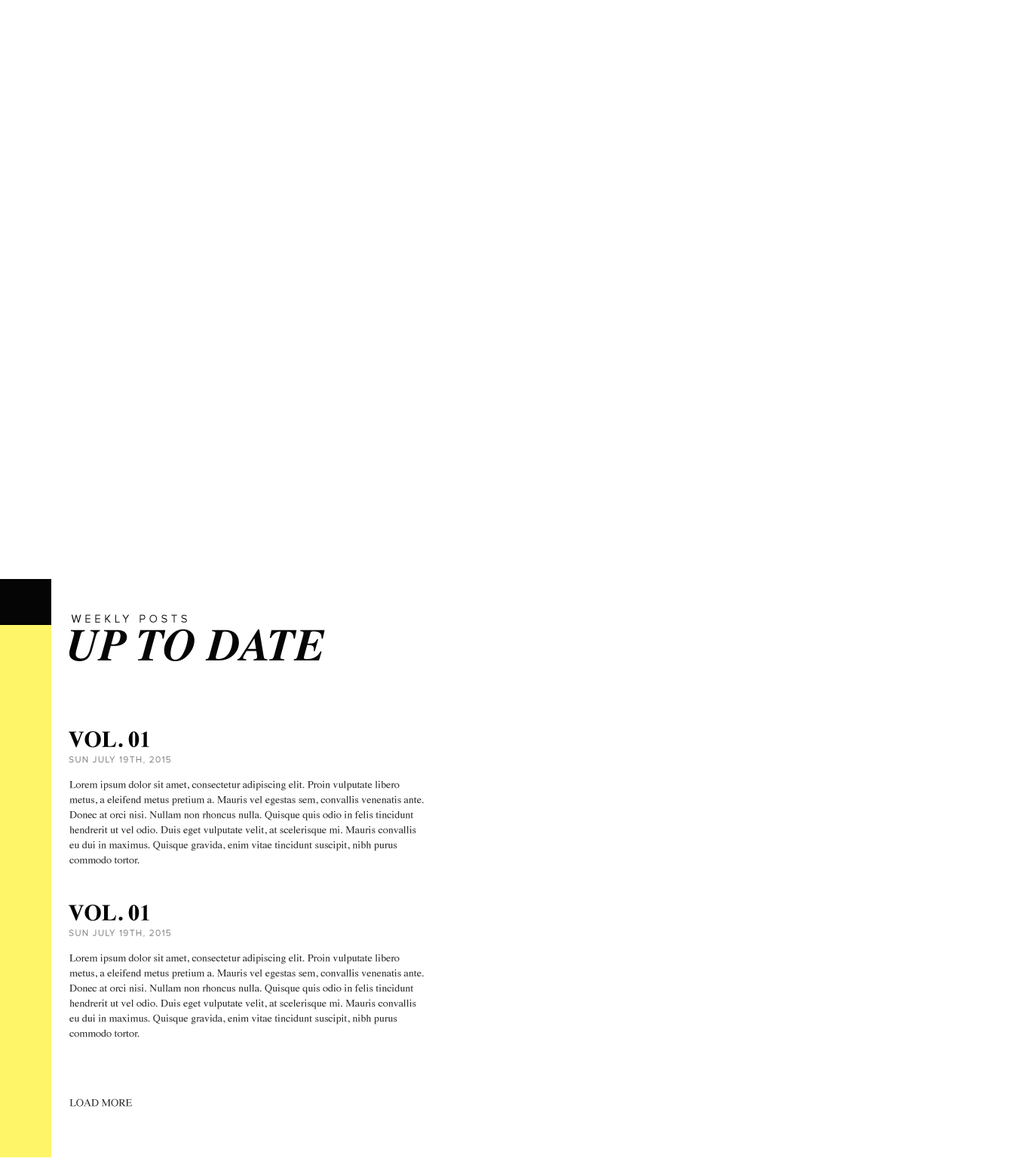
<style>
.page{position:relative;width:1030px;height:1158px;background:#ffffff}
.page>*{position:absolute;margin:0}
.t1{font:11.3px "ProximaNova-Regular";letter-spacing:0.3em;color:#050505}
.t2{font:45.2px "Times-BoldItalic";color:#050505}
.t3{font:22.6px "Times-Bold";color:#050505}
.t4{font:9px "ProximaNova-Regular";letter-spacing:0.1em;color:#818181}
.t5{font:10.6px/15.1px "Times-Roman";color:#303030}
.t6{font:10.6px "Times-Roman";color:#303030}
</style>
<div class="page">
<p class="t1" style="left:71px;top:614px;width:116px;height:9px">WEEKLY POSTS</p>
<p class="t2" style="left:69px;top:629px;width:256px;height:32px">UP TO DATE</p>
<p class="t3" style="left:69px;top:731px;width:80px;height:17px">VOL. 01</p>
<p class="t4" style="left:69px;top:756px;width:102px;height:8px">SUN JULY 19TH, 2015</p>
<p class="t5" style="left:69px;top:780px;width:355px;height:84px">Lorem ipsum dolor sit amet, consectetur adipiscing elit. Proin vulputate libero metus, a eleifend metus pretium a. Mauris vel egestas sem, convallis venenatis ante. Donec at orci nisi. Nullam non rhoncus nulla. Quisque quis odio in felis tincidunt hendrerit ut vel odio. Duis eget vulputate velit, at scelerisque mi. Mauris convallis eu dui in maximus. Quisque gravida, enim vitae tincidunt suscipit, nibh purus commodo tortor.</p>
<p class="t3" style="left:69px;top:905px;width:80px;height:16px">VOL. 01</p>
<p class="t4" style="left:69px;top:930px;width:102px;height:7px">SUN JULY 19TH, 2015</p>
<p class="t5" style="left:69px;top:954px;width:355px;height:83px">Lorem ipsum dolor sit amet, consectetur adipiscing elit. Proin vulputate libero metus, a eleifend metus pretium a. Mauris vel egestas sem, convallis venenatis ante. Donec at orci nisi. Nullam non rhoncus nulla. Quisque quis odio in felis tincidunt hendrerit ut vel odio. Duis eget vulputate velit, at scelerisque mi. Mauris convallis eu dui in maximus. Quisque gravida, enim vitae tincidunt suscipit, nibh purus commodo tortor.</p>
<p class="t6" style="left:69px;top:1098px;width:63px;height:9px">LOAD MORE</p>
</div>
